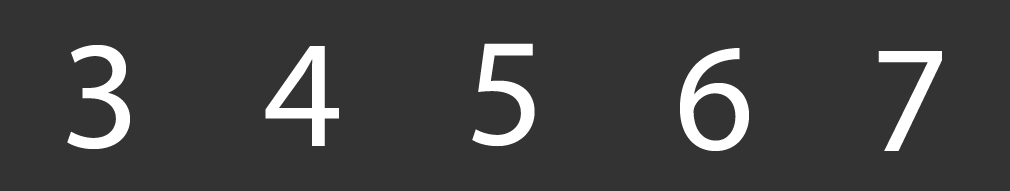
<style>
.page{position:relative;width:1010px;height:191px;background:#333333}
.page>*{position:absolute;margin:0}
.t1{font:154.2px "MyriadPro-Regular";color:#ffffff}
</style>
<div class="page">
<p class="t1" style="left:67px;top:45px;width:63px;height:105px">3</p>
<p class="t1" style="left:265px;top:46px;width:74px;height:100px">4</p>
<p class="t1" style="left:472px;top:43px;width:63px;height:104px">5</p>
<p class="t1" style="left:680px;top:48px;width:69px;height:103px">6</p>
<p class="t1" style="left:878px;top:51px;width:64px;height:100px">7</p>
</div>
